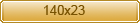
<style>
.page{position:relative;width:140px;height:23px}
.page>*{position:absolute;margin:0}
.t1{font:13px "ArialMT";color:#775100}
</style>
<div class="page">
<p class="t1" style="left:44px;top:5px;width:41px;height:10px">140x23</p>
</div>
